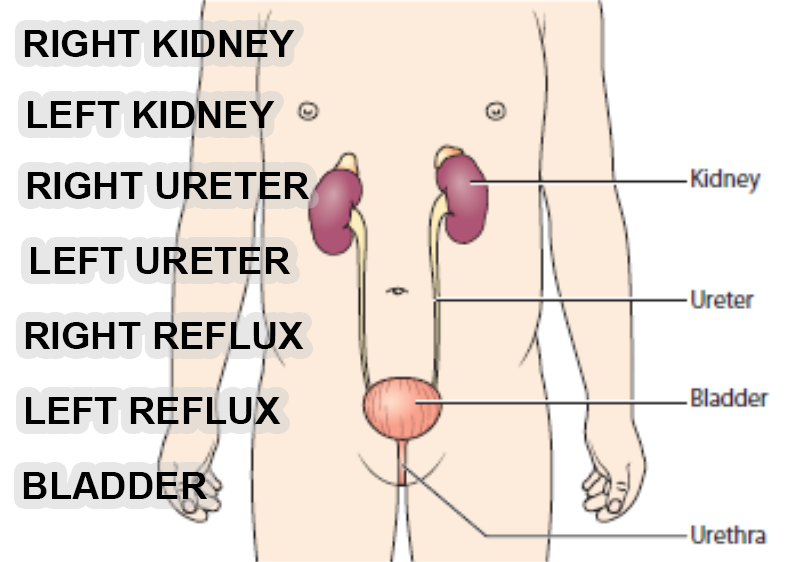
<style>
.page{position:relative;width:804px;height:562px;background:#ffffff}
.page>*{position:absolute;margin:0}
.t1{font:38px "Arial-BoldMT";color:#000000}
</style>
<div class="page">
<p class="t1" style="left:24px;top:30px;width:271px;height:27px">RIGHT KIDNEY</p>
<p class="t1" style="left:28px;top:101px;width:247px;height:27px">LEFT KIDNEY</p>
<p class="t1" style="left:27px;top:172px;width:283px;height:27px">RIGHT URETER</p>
<p class="t1" style="left:31px;top:247px;width:260px;height:27px">LEFT URETER</p>
<p class="t1" style="left:25px;top:322px;width:279px;height:27px">RIGHT REFLUX</p>
<p class="t1" style="left:26px;top:397px;width:255px;height:27px">LEFT REFLUX</p>
<p class="t1" style="left:23px;top:472px;width:185px;height:27px">BLADDER</p>
</div>
